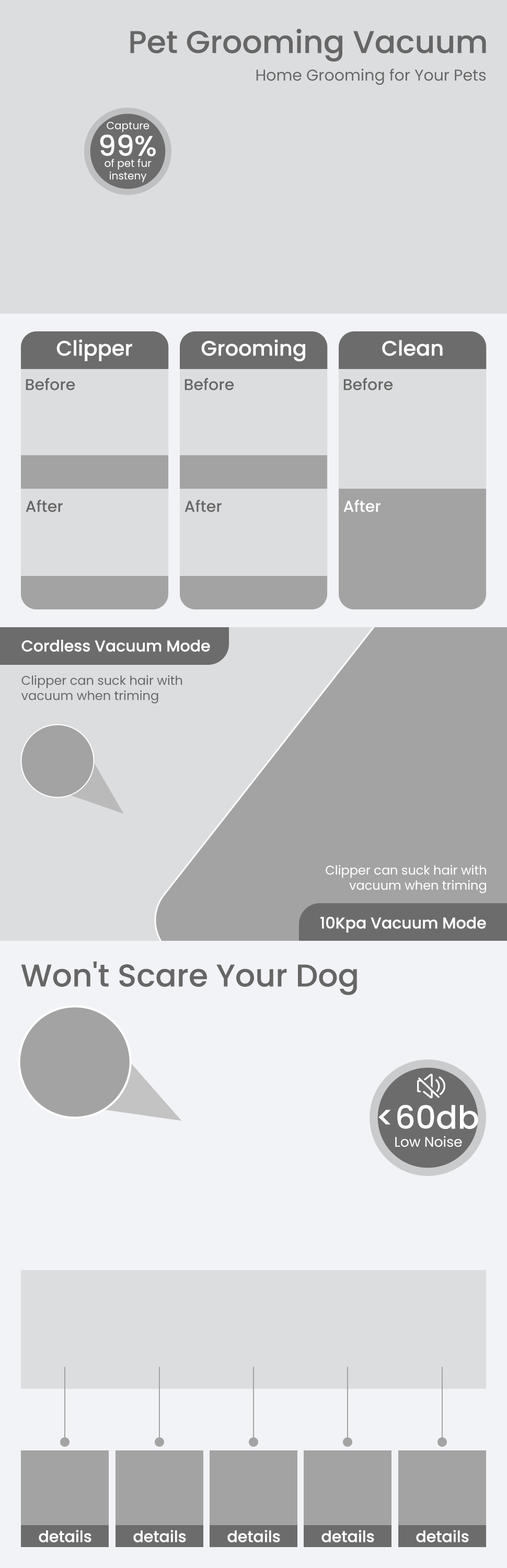
<style>
.page{position:relative;width:507px;height:1568px;background:#dcdddf}
.page>*{position:absolute;margin:0}
.t1{font:31.4px "Poppins-Medium";color:#666666}
.t2{font:15.7px "Poppins-Regular";color:#666666}
.t3{font:10.5px "Poppins-Regular";color:#ffffff}
.t4{font:28.6px "Poppins-Medium";color:#ffffff}
.t5{font:20.9px "Poppins-Medium";color:#ffffff}
.t6{font:15.7px "Poppins-Medium";color:#666666}
.t7{font:15.7px "Poppins-Medium";color:#ffffff}
.t8{font:12.5px "Poppins-Regular";color:#666666}
.t9{font:12.5px "Poppins-Regular";color:#ffffff}
.t10{font:31.9px "Poppins-Medium";color:#ffffff}
.t11{font:13.9px "Poppins-Regular";color:#ffffff}
</style>
<div class="page">
<p class="t1" style="left:130px;top:29px;width:356px;height:33px">Pet Grooming Vacuum</p>
<p class="t2" style="left:256px;top:68px;width:230px;height:17px">Home Grooming for Your Pets</p>
<p class="t3" style="left:107px;top:122px;width:42px;height:10px">Capture</p>
<p class="t4" style="left:100px;top:134px;width:56px;height:22px">99%</p>
<p class="t3" style="left:105px;top:159px;width:47px;height:23px;text-align:center">of pet fur<br>insteny</p>
<p class="t5" style="left:56px;top:339px;width:76px;height:22px">Clipper</p>
<p class="t5" style="left:201px;top:339px;width:104px;height:23px">Grooming</p>
<p class="t5" style="left:382px;top:340px;width:61px;height:16px">Clean</p>
<p class="t6" style="left:26px;top:378px;width:49px;height:12px">Before</p>
<p class="t6" style="left:185px;top:378px;width:49px;height:12px">Before</p>
<p class="t6" style="left:343px;top:378px;width:50px;height:12px">Before</p>
<p class="t6" style="left:26px;top:500px;width:37px;height:12px">After</p>
<p class="t6" style="left:185px;top:500px;width:37px;height:12px">After</p>
<p class="t7" style="left:343px;top:500px;width:38px;height:12px">After</p>
<p class="t7" style="left:21px;top:640px;width:189px;height:12px">Cordless Vacuum Mode</p>
<p class="t8" style="left:21px;top:675px;width:161px;height:29px">Clipper can suck hair with<br>vacuum when triming</p>
<p class="t9" style="left:326px;top:865px;width:160px;height:28px;text-align:right">Clipper can suck hair with<br>vacuum when triming</p>
<p class="t7" style="left:320px;top:917px;width:166px;height:16px">10Kpa Vacuum Mode</p>
<p class="t1" style="left:21px;top:961px;width:336px;height:34px">Won't Scare Your Dog</p>
<p class="t10" style="left:378px;top:1105px;width:100px;height:24px">&lt;60db</p>
<p class="t11" style="left:395px;top:1136px;width:67px;height:11px">Low Noise</p>
<p class="t7" style="left:39px;top:1530px;width:52px;height:12px">details</p>
<p class="t7" style="left:133px;top:1530px;width:53px;height:12px">details</p>
<p class="t7" style="left:227px;top:1530px;width:53px;height:12px">details</p>
<p class="t7" style="left:321px;top:1530px;width:53px;height:12px">details</p>
<p class="t7" style="left:416px;top:1530px;width:53px;height:12px">details</p>
</div>
